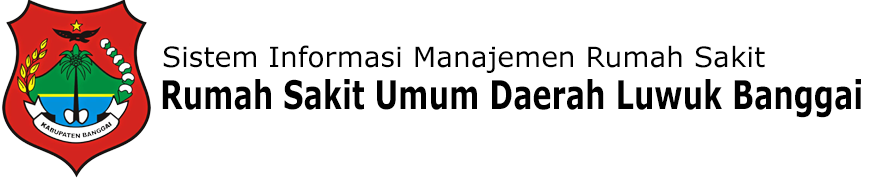
<style>
.page{position:relative;width:888px;height:180px;background:#ffffff}
.page>*{position:absolute;margin:0}
.t1{font:28px "Verdana";color:#000000}
.t2{font:39.4px "Verdana-Bold";color:#000000;scale:0.73 1}
</style>
<div class="page">
<p class="t1" style="left:163px;top:45px;width:602px;height:28px">Sistem Informasi Manajemen Rumah Sakit</p>
<p class="t2" style="left:162px;top:79px;width:699px;height:39px">Rumah Sakit Umum Daerah Luwuk Banggai</p>
</div>
